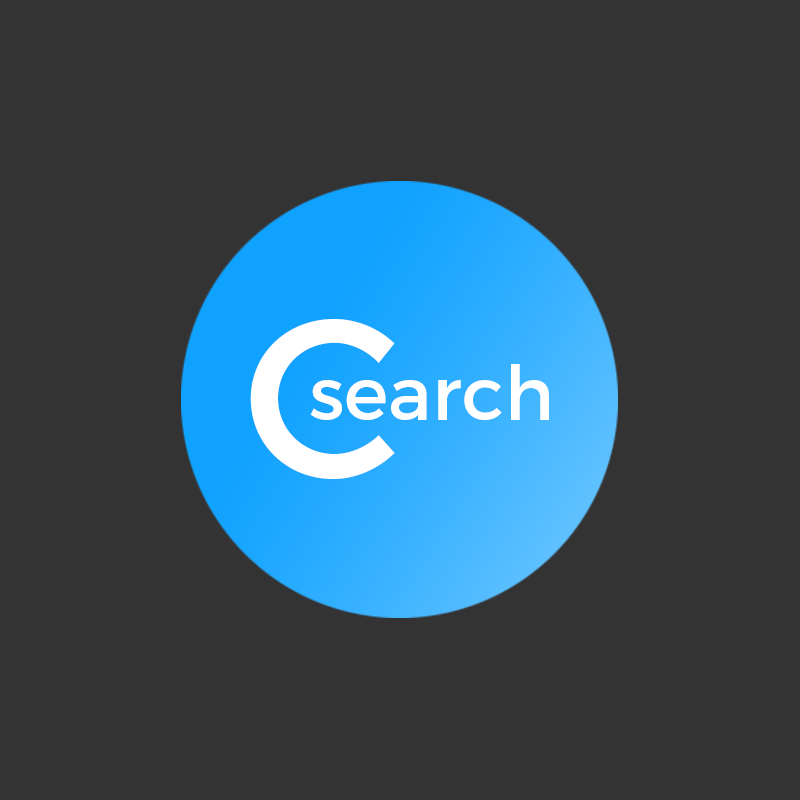
<style>
.page{position:relative;width:800px;height:800px;background:#333333}
.page>*{position:absolute;margin:0}
.t1{font:226.3px "Montserrat-Regular";color:#ffffff}
.t2{font:75px "Montserrat-Regular";color:#ffffff}
</style>
<div class="page">
<p class="t1" style="left:250px;top:319px;width:145px;height:161px">C</p>
<p class="t2" style="left:310px;top:364px;width:239px;height:56px">search</p>
</div>
